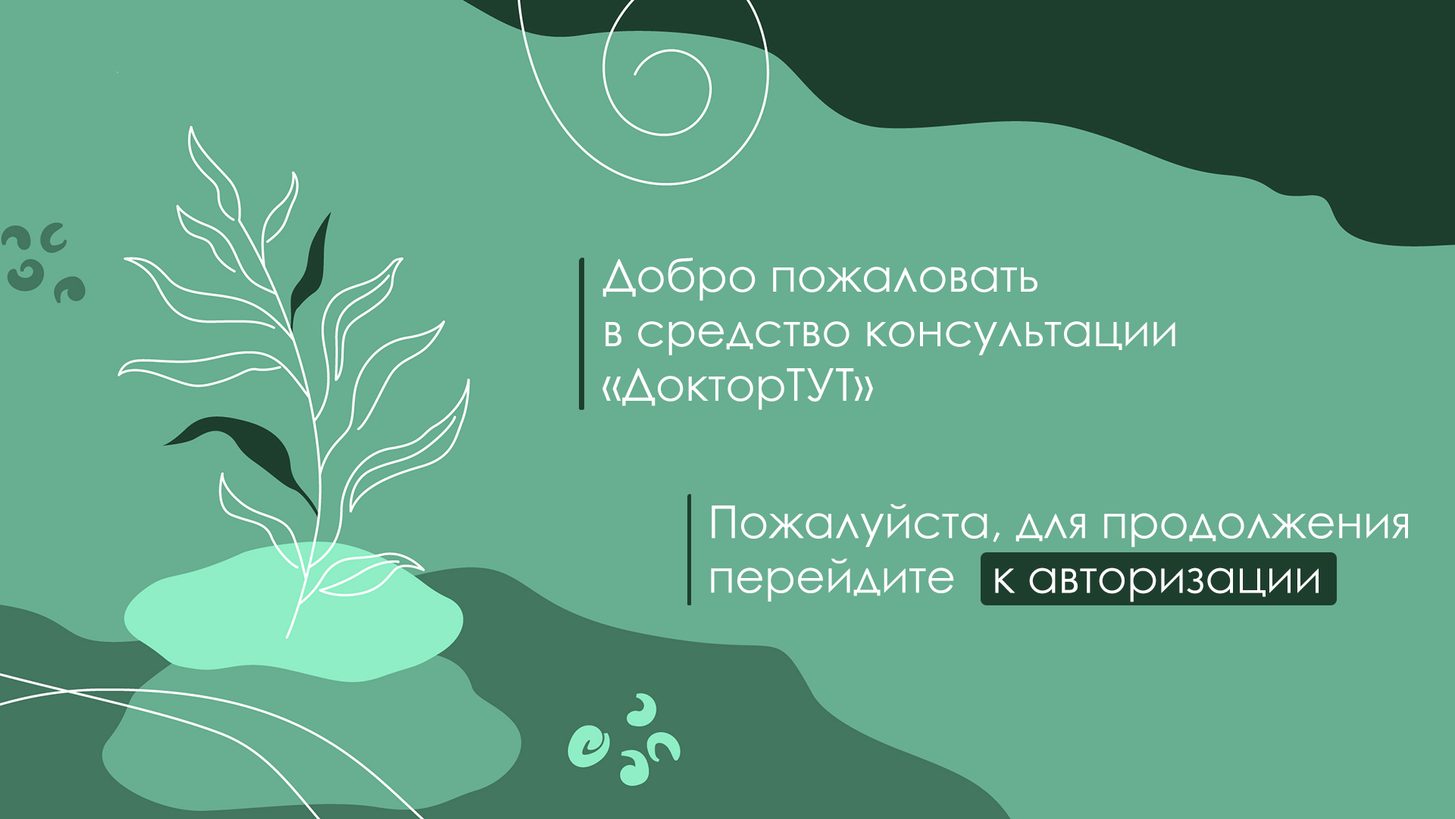
<style>
.page{position:relative;width:1455px;height:819px;background:#68ae91}
.page>*{position:absolute;margin:0}
.t1{font:45.5px "CenturyGothic";color:#ffffff}
</style>
<div class="page">
<p class="t1" style="left:603px;top:258px;width:573px;height:152px">Добро пожаловать<br>в средство консультации<br>«ДокторТУТ»</p>
<p class="t1" style="left:711px;top:504px;width:697px;height:98px">Пожалуйста, для продолжения <br>перейдите</p>
<p class="t1" style="left:995px;top:568px;width:324px;height:35px">к авторизации</p>
</div>
